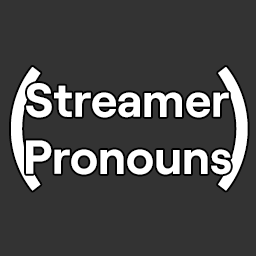
<style>
.page{position:relative;width:256px;height:256px;background:#333333}
.page>*{position:absolute;margin:0}
.t1{font:144px "Roobert-Regular";color:#ffffff}
.t2{font:48px "Roobert-Bold";color:#ffffff}
</style>
<div class="page">
<p class="t1" style="left:11px;top:67px;width:237px;height:124px">(     )</p>
<p class="t2" style="left:26px;top:83px;width:205px;height:92px;text-align:center">Streamer<br>Pronouns</p>
</div>
